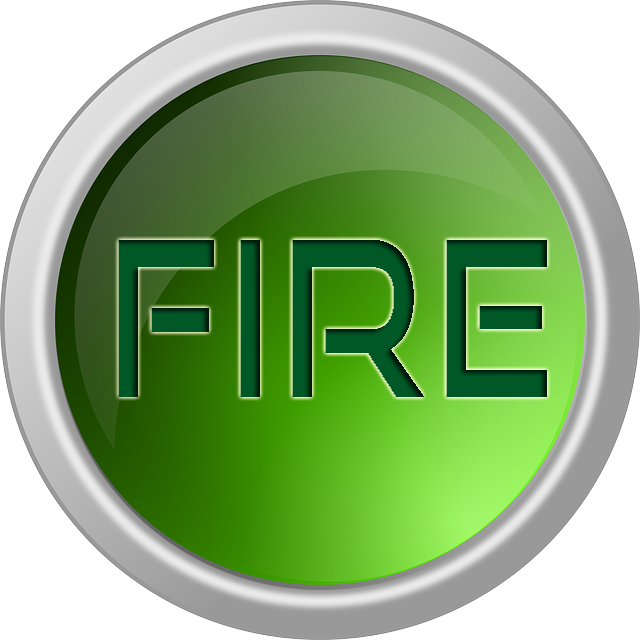
<style>
.page{position:relative;width:640px;height:640px;background:#ffffff}
.page>*{position:absolute;margin:0}
.t1{font:215.8px "GoodTimesRg-Regular";letter-spacing:0.08em;color:#005826;scale:0.71 1}
</style>
<div class="page">
<p class="t1" style="left:119px;top:240px;width:428px;height:157px">FIRE</p>
</div>
